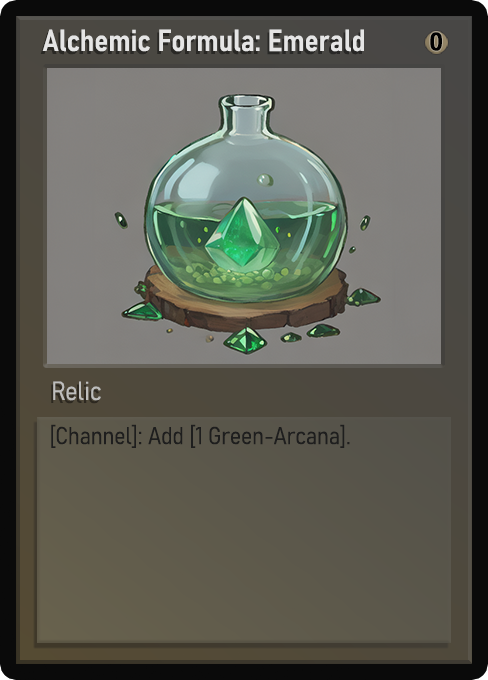
<style>
.page{position:relative;width:488px;height:680px}
.page>*{position:absolute;margin:0}
.t1{font:30px "Bahnschrift-SemiBoldSemiCondensed";color:#f2f2f2;font-weight:bold}
.t2{font:25px "WTRRoycroft";color:#000000;font-weight:bold;scale:1.09 1}
.t3{font:26px "Bahnschrift-LightSemiCondensed";color:#c8c8c8;font-weight:bold}
.t4{font:24px "Bahnschrift-LightSemiCondensed";color:#1e1e1e;font-weight:bold}
</style>
<div class="page">
<p class="t1" style="left:42px;top:29px;width:322px;height:23px;opacity:0.9">Alchemic Formula: Emerald</p>
<p class="t2" style="left:430px;top:32px;width:12px;height:19px">0</p>
<p class="t3" style="left:53px;top:381px;width:48px;height:20px;opacity:0.9">Relic</p>
<p class="t4" style="left:51px;top:424px;width:299px;height:24px">[Channel]: Add [1 Green-Arcana].</p>
</div>
